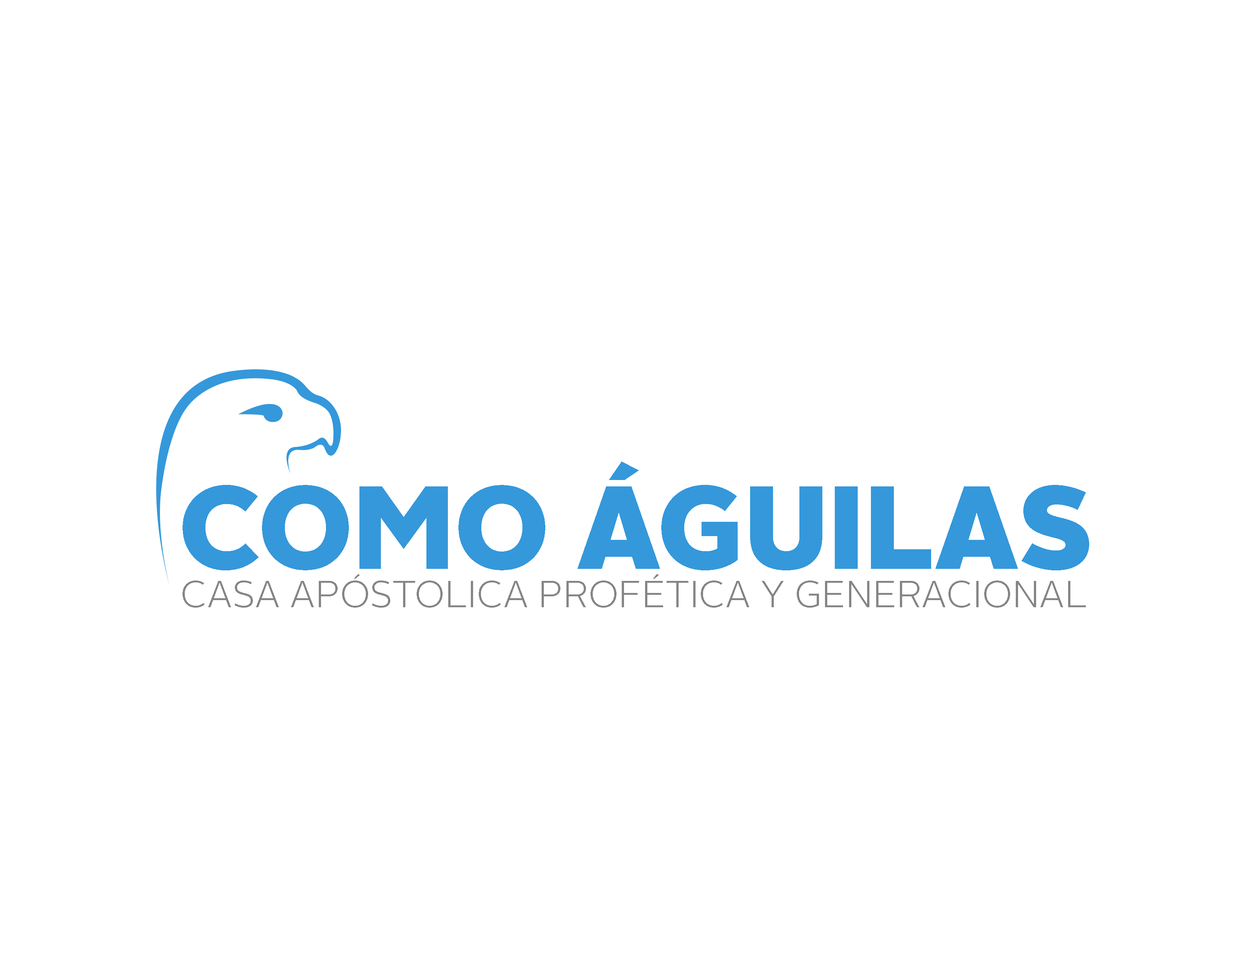
<style>
.page{position:relative;width:1242px;height:960px;background:#ffffff}
.page>*{position:absolute;margin:0}
.t1{font:117.6px "AlrightSans-Black";color:#3498db}
.t2{font:37.6px "AlrightSans-Light";color:#858585}
</style>
<div class="page">
<p class="t1" style="left:183px;top:462px;width:906px;height:108px">COMO ÁGUILAS</p>
<p class="t2" style="left:183px;top:574px;width:903px;height:34px">CASA APÓSTOLICA PROFÉTICA Y GENERACIONAL</p>
</div>
